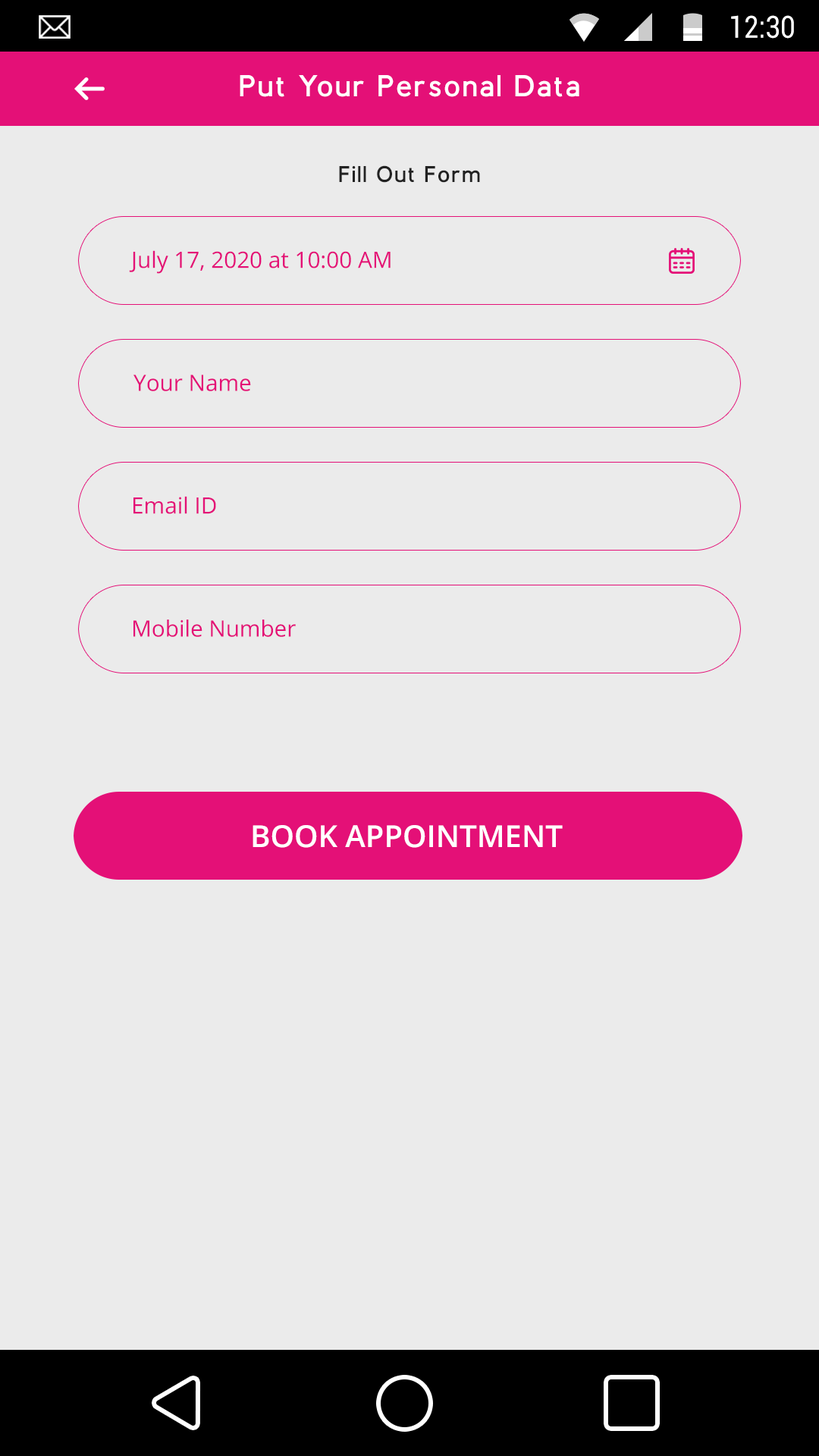
<style>
.page{position:relative;width:819px;height:1456px;background:#ebebeb}
.page>*{position:absolute;margin:0}
.t1{font:30.5px "Roboto-Regular";color:#ffffff;scale:0.87 1}
.t2{font:30.3px "BerlinBold";letter-spacing:0.1em;color:#ffffff}
.t3{font:22.7px "BerlinBold";letter-spacing:0.1em;color:#222222}
.t4{font:22.5px "OpenSans";color:#e41077}
.t5{font:30.3px "OpenSans-Semibold";color:#ffffff}
</style>
<div class="page">
<p class="t1" style="left:731px;top:15px;width:63px;height:24px">12:30</p>
<p class="t2" style="left:240px;top:75px;width:339px;height:22px">Put Your Personal Data</p>
<p class="t3" style="left:339px;top:165px;width:141px;height:18px">Fill Out Form</p>
<p class="t4" style="left:129px;top:250px;width:262px;height:24px">July 17, 2020 at 10:00 AM</p>
<p class="t4" style="left:133px;top:375px;width:118px;height:16px">Your Name</p>
<p class="t4" style="left:133px;top:496px;width:83px;height:18px">Email ID</p>
<p class="t4" style="left:133px;top:620px;width:163px;height:17px">Mobile Number</p>
<p class="t5" style="left:253px;top:825px;width:310px;height:23px">BOOK APPOINTMENT</p>
</div>
